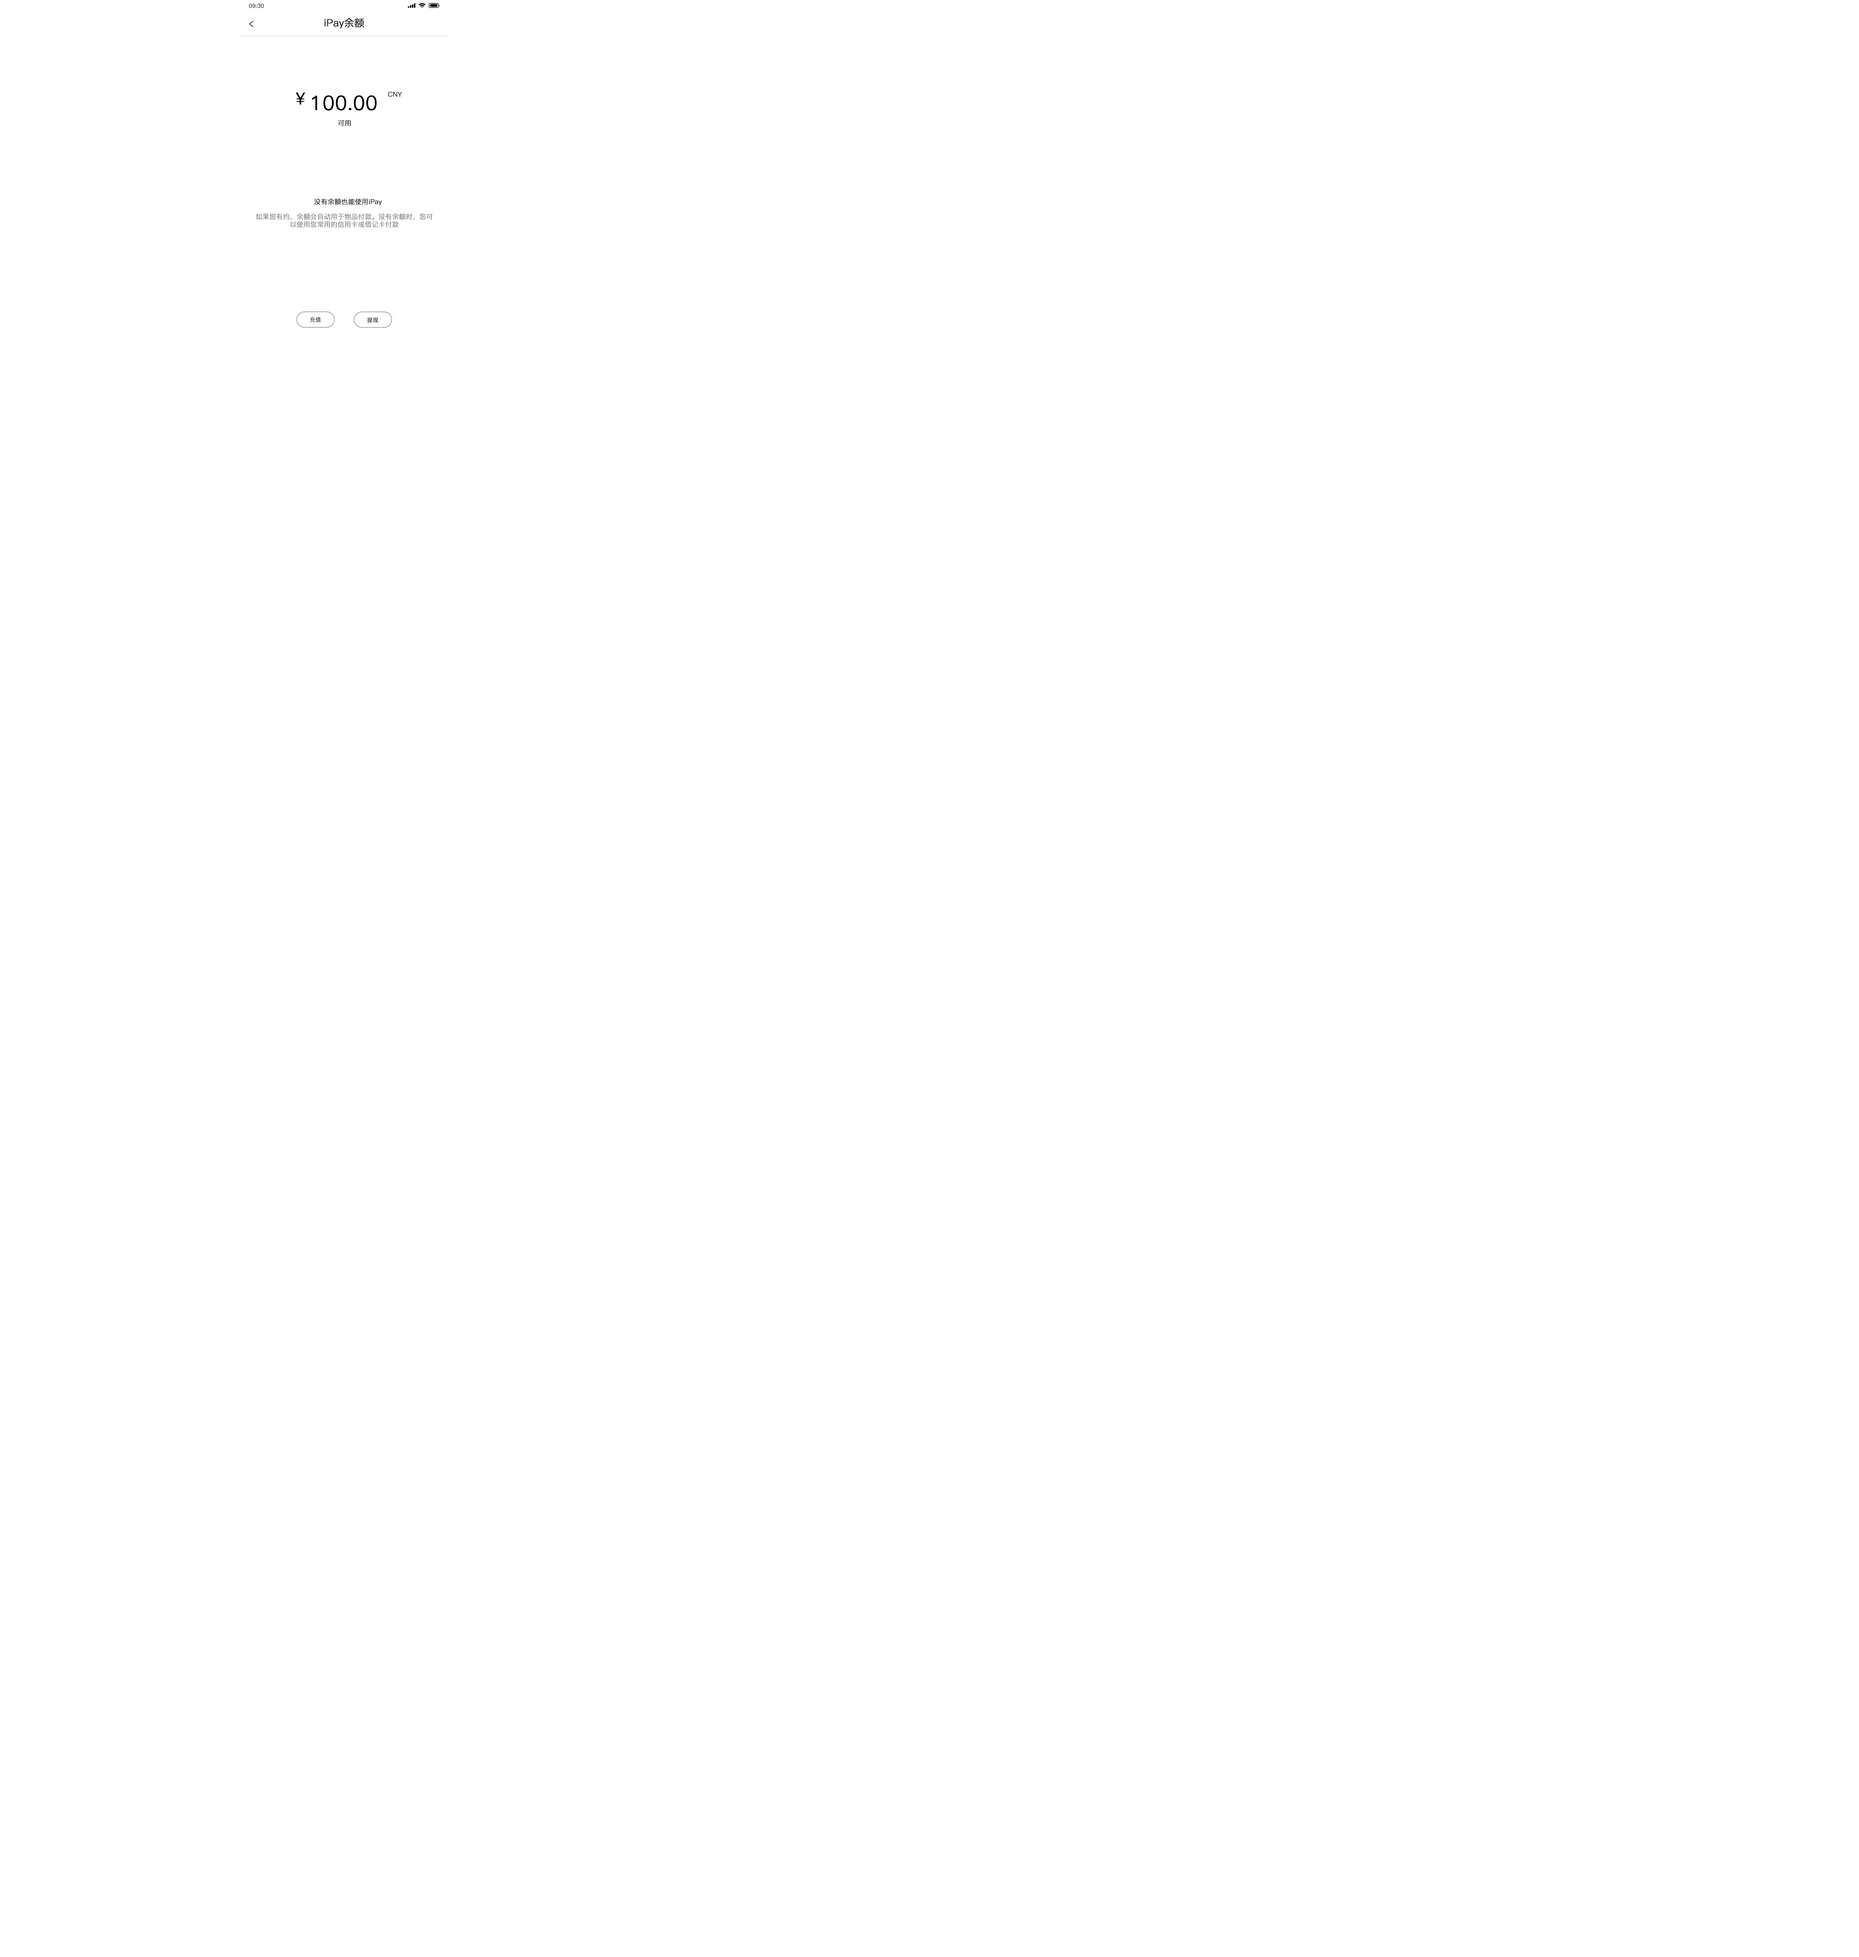
<style>
.page{position:relative;width:1859px;height:1957px;background:#ffffff}
.page>*{position:absolute;margin:0}
.t1{font:5.5px "PingFang-SC-Regular";color:#000000;font-weight:bold}
.t2{font:10px "PingFang-SC-Regular";color:#000000;font-weight:bold}
.t3{font:16.6px "PingFang-SC-Regular";color:#000000;font-weight:bold}
.t4{font:19.9px "PingFang-SC-Regular";color:#000000;font-weight:bold}
.t5{font:6.6px "PingFang-SC-Regular";color:#000000;font-weight:bold}
.t6{font:6.6px "PingFang-SC-Regular";color:#787878;font-weight:bold}
</style>
<div class="page">
<p class="t1" style="left:249px;top:4px;width:15px;height:4px">09:30</p>
<p class="t2" style="left:324px;top:18px;width:40px;height:11px">iPay余额</p>
<p class="t3" style="left:296px;top:92px;width:9px;height:13px">￥</p>
<p class="t4" style="left:312px;top:95px;width:65px;height:15px">100.00</p>
<p class="t5" style="left:388px;top:92px;width:14px;height:5px">CNY</p>
<p class="t5" style="left:338px;top:120px;width:13px;height:6px">可用</p>
<p class="t5" style="left:314px;top:198px;width:68px;height:7px">没有余额也能使用iPay</p>
<p class="t6" style="left:256px;top:213px;width:177px;height:14px;text-align:center">如果您有约，余额会自动用于物品付款。没有余额时，您可<br>以使用您常用的信用卡或借记卡付款</p>
<p class="t1" style="left:310px;top:317px;width:11px;height:5px">充值</p>
<p class="t1" style="left:367px;top:317px;width:11px;height:6px">提现</p>
</div>
